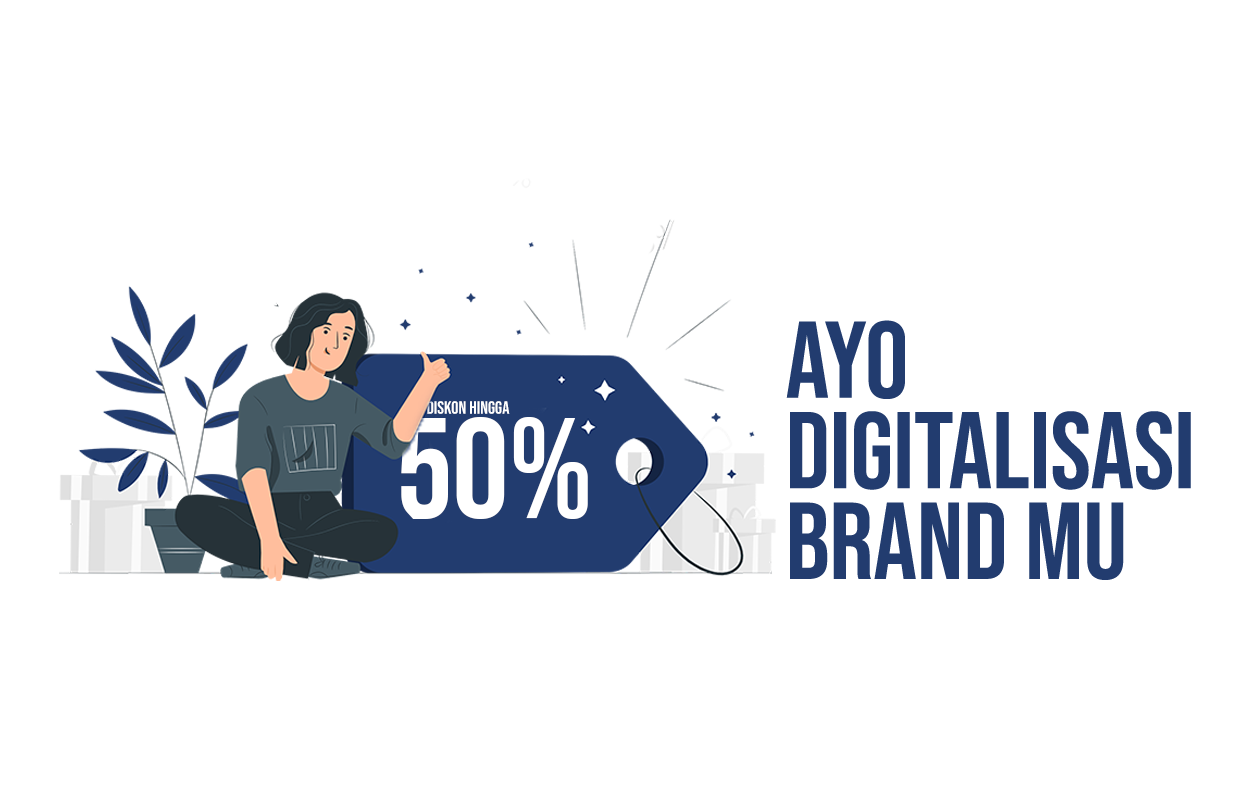
<style>
.page{position:relative;width:1250px;height:800px;background:#ffffff}
.page>*{position:absolute;margin:0}
.t1{font:108.7px/90.6px "BebasNeue-Regular";color:#223c6f}
.t2{font:18.1px "BebasNeue-Regular";color:#ffffff}
.t3{font:141.6px "BebasNeue-Regular";color:#ffffff}
</style>
<div class="page">
<p class="t1" style="left:786px;top:320px;width:405px;height:260px">Ayo <br>Digitalisasi<br>brand Mu</p>
<p class="t2" style="left:427px;top:401px;width:83px;height:13px">Diskon Hingga</p>
<p class="t3" style="left:401px;top:417px;width:187px;height:102px">50%</p>
</div>
